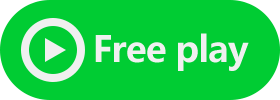
<style>
.page{position:relative;width:280px;height:100px;background:#00cc33}
.page>*{position:absolute;margin:0}
.t1{font:35.8px "MicrosoftYaHei-Bold";letter-spacing:-0.025em;color:#f0f0f0}
</style>
<div class="page">
<p class="t1" style="left:95px;top:33px;width:154px;height:38px">Free play</p>
</div>
